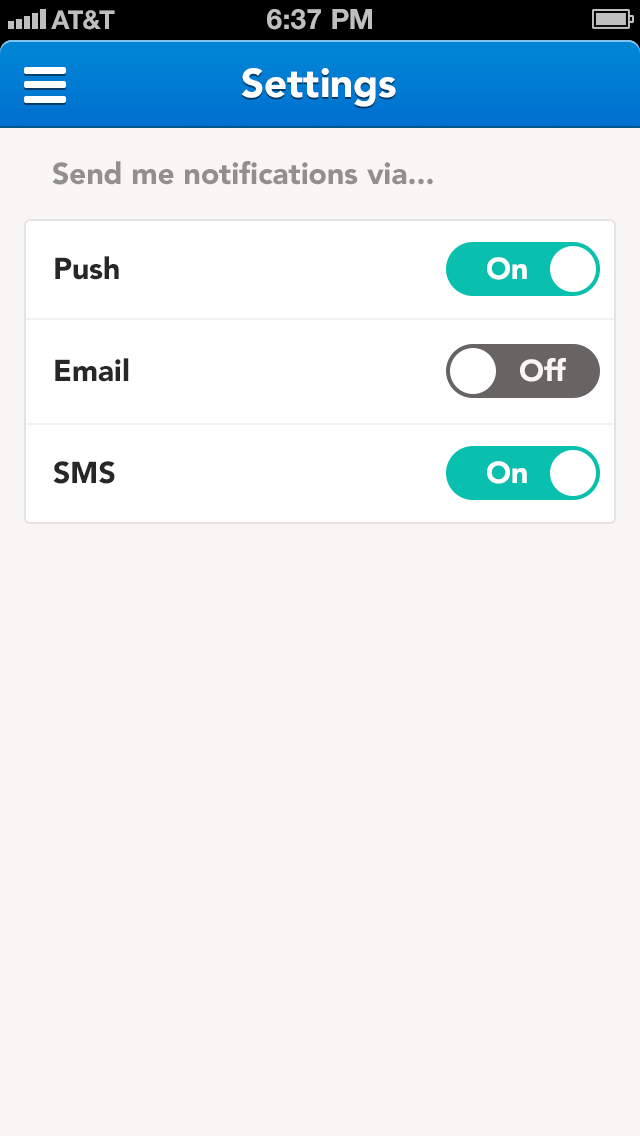
<style>
.page{position:relative;width:640px;height:1136px;background:#f9f7f6}
.page>*{position:absolute;margin:0}
.t1{font:40px "Avenir-Black";color:#ffffff}
.t2{font:30px "Avenir-Black";color:#91908e}
.t3{font:30px/102px "Avenir-Black";color:#282726}
.t4{font:30px "Avenir-Black";color:#ffffff}
.t5{font:30px "Avenir-Black";color:#f9f7f6}
</style>
<div class="page">
<p class="t1" style="left:241px;top:68px;width:155px;height:39px">Settings</p>
<p class="t1" style="left:241px;top:68px;width:155px;height:39px">Settings</p>
<p class="t2" style="left:52px;top:161px;width:381px;height:24px">Send me notifications via...</p>
<p class="t3" style="left:53px;top:256px;width:76px;height:228px">Push<br>Email<br>SMS</p>
<p class="t4" style="left:487px;top:257px;width:40px;height:23px">On</p>
<p class="t5" style="left:520px;top:358px;width:46px;height:24px">Off</p>
<p class="t4" style="left:487px;top:461px;width:40px;height:23px">On</p>
</div>
